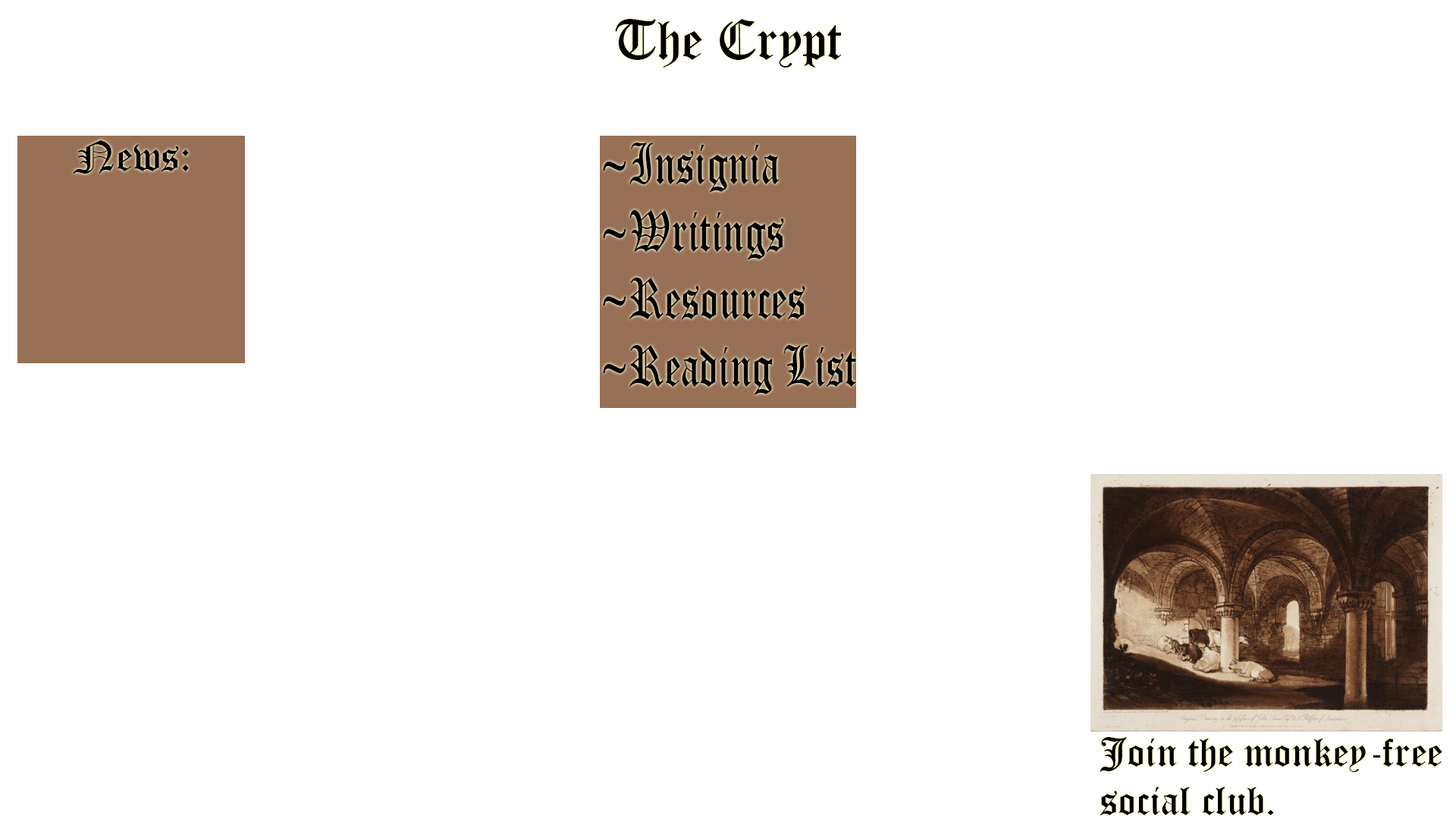
<style>
.page{position:relative;width:1456px;height:819px;background:#ffffff}
.page>*{position:absolute;margin:0}
.t1{font:54.6px "OldEnglishTextMT";color:#000000}
.t2{font:41.4px "OldEnglishTextMT";color:#000000}
.t3{font:56.2px "OldEnglishTextMT";color:#000000;scale:0.75 1}
</style>
<div class="page">
<p class="t1" style="left:615px;top:19px;width:226px;height:48px">The Crypt</p>
<p class="t2" style="left:73px;top:140px;width:116px;height:34px">News:</p>
<p class="t3" style="left:603px;top:143px;width:253px;height:252px">~Insignia<br>~Writings<br>~Resources<br>~Reading List</p>
</div>
